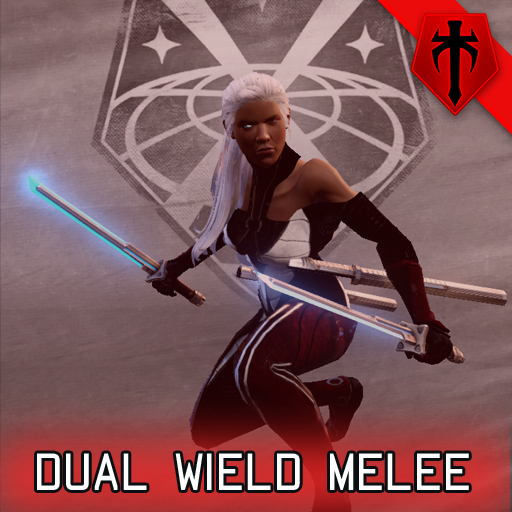
<style>
.page{position:relative;width:512px;height:512px}
.page>*{position:absolute;margin:0}
.t1{font:48px "AF-Carplates-Medium";color:#ffffff}
</style>
<div class="page">
<p class="t1" style="left:37px;top:453px;width:432px;height:37px">DUAL WIELD MELEE</p>
</div>
